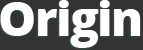
<style>
.page{position:relative;width:143px;height:50px;background:#333333}
.page>*{position:absolute;margin:0}
.t1{font:48px "OpenSans-Extrabold";letter-spacing:-0.025em;color:#ffffff}
</style>
<div class="page">
<p class="t1" style="left:0px;top:0px;width:141px;height:48px">Origin</p>
</div>
